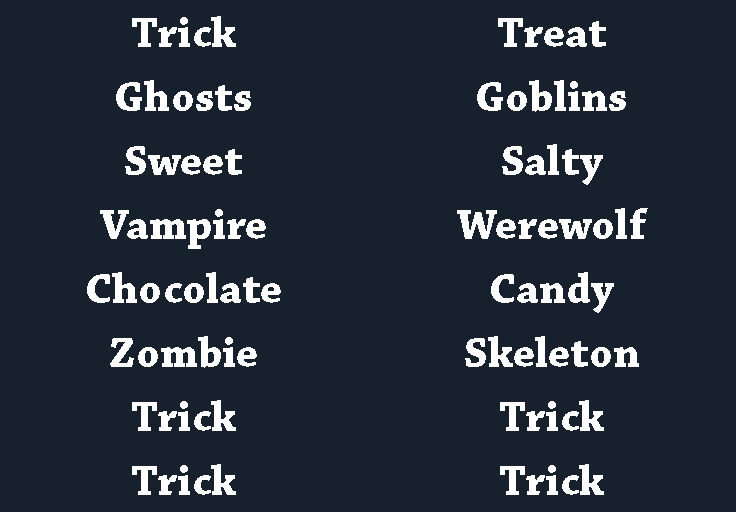
<style>
.page{position:relative;width:736px;height:512px;background:#17202d}
.page>*{position:absolute;margin:0}
.t1{font:44px "ChaparralPro-Bold";color:#ffffff}
</style>
<div class="page">
<p class="t1" style="left:132px;top:16px;width:104px;height:31px">Trick</p>
<p class="t1" style="left:498px;top:18px;width:108px;height:29px">Treat</p>
<p class="t1" style="left:116px;top:80px;width:135px;height:31px">Ghosts</p>
<p class="t1" style="left:477px;top:80px;width:149px;height:32px">Goblins</p>
<p class="t1" style="left:125px;top:146px;width:117px;height:29px">Sweet</p>
<p class="t1" style="left:502px;top:144px;width:101px;height:41px">Salty</p>
<p class="t1" style="left:100px;top:209px;width:166px;height:40px">Vampire</p>
<p class="t1" style="left:457px;top:208px;width:191px;height:31px">Werewolf</p>
<p class="t1" style="left:87px;top:272px;width:194px;height:31px">Chocolate</p>
<p class="t1" style="left:491px;top:272px;width:123px;height:41px">Candy</p>
<p class="t1" style="left:110px;top:336px;width:147px;height:32px">Zombie</p>
<p class="t1" style="left:465px;top:336px;width:174px;height:31px">Skeleton</p>
<p class="t1" style="left:132px;top:400px;width:104px;height:31px">Trick</p>
<p class="t1" style="left:500px;top:400px;width:104px;height:31px">Trick</p>
<p class="t1" style="left:132px;top:464px;width:104px;height:31px">Trick</p>
<p class="t1" style="left:500px;top:464px;width:104px;height:31px">Trick</p>
</div>
